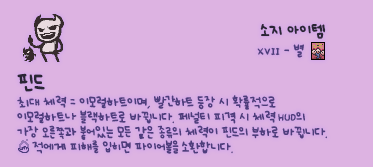
<style>
.page{position:relative;width:373px;height:167px;background:#ddb3e2}
.page>*{position:absolute;margin:0}
.t1{font:12px "UhBeeSe_hyunBold";color:#2b2636}
.t2{font:12px "UhBeeSe_hyunBold";letter-spacing:-0.1em;color:#2b2636}
.t3{font:10px "Font_soulsV2_Title-Regular";color:#4e3d7c}
.t4{font:10px "UhBeeSe_hyunBold";color:#4e3d7c}
.t5{font:10px/15px "UhBeeSe_hyunBold";letter-spacing:-0.025em;color:#4e3d7c}
.t6{font:16px/23px "UhBeeSe_hyunBold";color:#2b2636}
.t7{font:10px/15px "UhBeeSe_hyunBold";letter-spacing:-0.2em;color:#4e3d7c}
.t8{font:10px/15px "UhBeeSe_hyunBold";letter-spacing:-0.15em;color:#4e3d7c}
.t9{font:10px/15px "Font_soulsV2_Title-Regular";letter-spacing:-0.025em;color:#4e3d7c}
.t10{font:10px/15px "UhBeeSe_hyunBold";color:#4e3d7c}
.t11{font:10px/15px "UhBeeSe_hyunBold";letter-spacing:-0.125em;color:#4e3d7c}
</style>
<div class="page">
<p class="t1" style="left:260px;top:24px;width:66px;height:15px"><span class="t2">소</span>지 아이템</p>
<p class="t3" style="left:257px;top:44px;width:47px;height:14px">XVII<span class="t4"> - 별</span></p>
<p class="t5" style="left:17px;top:73px;width:310px;height:81px"><span class="t6">핀드<br></span>최대 체력 = 이모럴하트이며, <span class="t7">빨</span><span class="t8">간하</span>트 등장 시 확률적으로<br>이모럴하트나 블랙하트로 바뀝니다. 페널티 피격 시 체력<span class="t9"> HUD</span>의 <span class="t8">가</span>장 오른쪽과 붙어있는 모든 같은 종류의 체력이 핀드의 부하로 바뀝니다.<br>    적에게 피해를 입히면 파<span class="t10">이어볼을</span><span class="t11"> 소환</span>합니다.</p>
</div>
